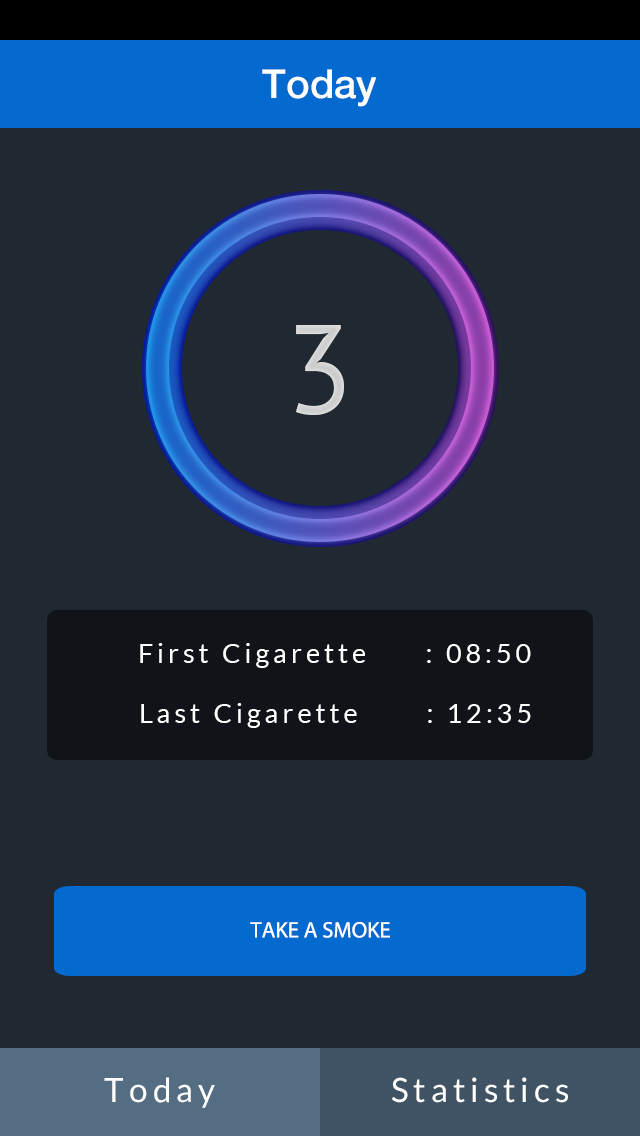
<style>
.page{position:relative;width:640px;height:1136px;background:#202931}
.page>*{position:absolute;margin:0}
.t1{font:40px "HelveticaNeue-Medium";color:#ffffff}
.t2{font:125px "PTSans-Regular";letter-spacing:0.15em;color:#cbcbcb}
.t3{font:27px "Lato-Regular";letter-spacing:0.15em;color:#ffffff}
.t4{font:22.5px "Lato-Regular";color:#ffffff;text-transform:uppercase}
.t5{font:33.3px "Lato-Regular";letter-spacing:0.15em;color:#ffffff}
</style>
<div class="page">
<p class="t1" style="left:262px;top:69px;width:115px;height:38px">Today</p>
<p class="t2" style="left:296px;top:325px;width:48px;height:90px">3</p>
<p class="t3" style="left:140px;top:643px;width:391px;height:25px">First Cigarette      : 08:50</p>
<p class="t3" style="left:141px;top:703px;width:390px;height:25px">Last Cigarette       : 12:35</p>
<p class="t4" style="left:250px;top:922px;width:140px;height:16px">Take a smoke</p>
<p class="t5" style="left:104px;top:1077px;width:111px;height:31px">Today</p>
<p class="t5" style="left:392px;top:1077px;width:176px;height:26px">Statistics</p>
</div>
